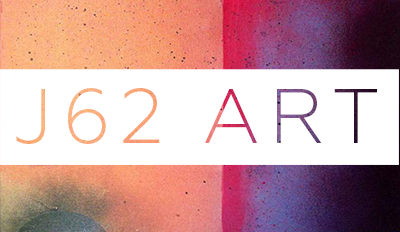
<style>
.page{position:relative;width:400px;height:232px;background:#ffffff}
.page>*{position:absolute;margin:0}
.t1{font:76.6px "Geometria-Light";letter-spacing:0.12em}
</style>
<div class="page">
<p class="t1" style="left:16px;top:88px;width:361px;height:56px">J62 ART</p>
</div>
